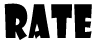
<style>
.page{position:relative;width:100px;height:45px;background:#ffffff}
.page>*{position:absolute;margin:0}
.t1{font:44.7px "ShowcardGothic-Reg";letter-spacing:0.04em;color:#000000;scale:0.76 1}
</style>
<div class="page">
<p class="t1" style="left:4px;top:3px;width:88px;height:37px">rate</p>
</div>
